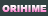
<style>
.page{position:relative;width:48px;height:16px;background:#314242}
.page>*{position:absolute;margin:0}
.t1{font:9.8px "Arial-Black";scale:0.92 1}
</style>
<div class="page">
<p class="t1" style="left:2px;top:5px;width:45px;height:7px">ORIHIME</p>
</div>
